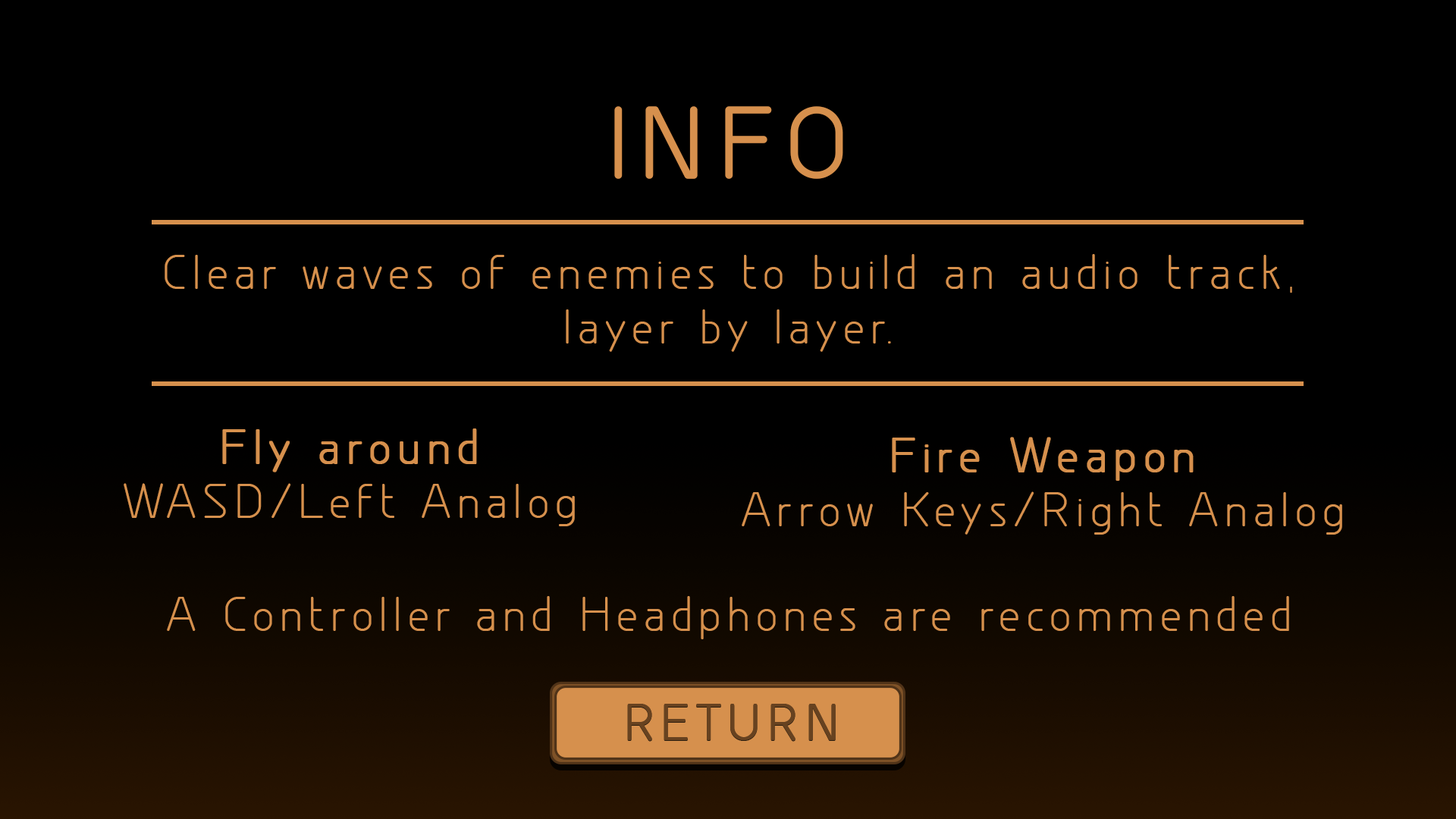
<style>
.page{position:relative;width:1456px;height:819px;background:#000000}
.page>*{position:absolute;margin:0}
.t1{font:91.8px "GreyscaleBasic";letter-spacing:0.15em;color:#d6904d;font-weight:bold}
.t2{font:45.5px "GreyscaleBasic";letter-spacing:0.15em;color:#d6904d}
.t3{font:45.5px "GreyscaleBasic";letter-spacing:0.15em;color:#d6904d;font-weight:bold}
.t4{font:47px "GreyscaleBasic";letter-spacing:0.15em;color:#674220;font-weight:bold}
</style>
<div class="page">
<p class="t1" style="left:614px;top:106px;width:229px;height:73px">INFO</p>
<p class="t2" style="left:165px;top:254px;width:1127px;height:98px;text-align:center">Clear waves of enemies to build an audio track,<br>layer by layer.</p>
<p class="t2" style="left:124px;top:428px;width:451px;height:98px;text-align:center"><span class="t3">Fly around<br></span>WASD/Left Analog</p>
<p class="t2" style="left:742px;top:437px;width:600px;height:98px;text-align:center"><span class="t3">Fire Weapon<br></span>Arrow Keys/Right Analog</p>
<p class="t2" style="left:167px;top:596px;width:1122px;height:43px">A Controller and Headphones are recommended</p>
<p class="t4" style="left:627px;top:704px;width:209px;height:37px">RETURN</p>
</div>
